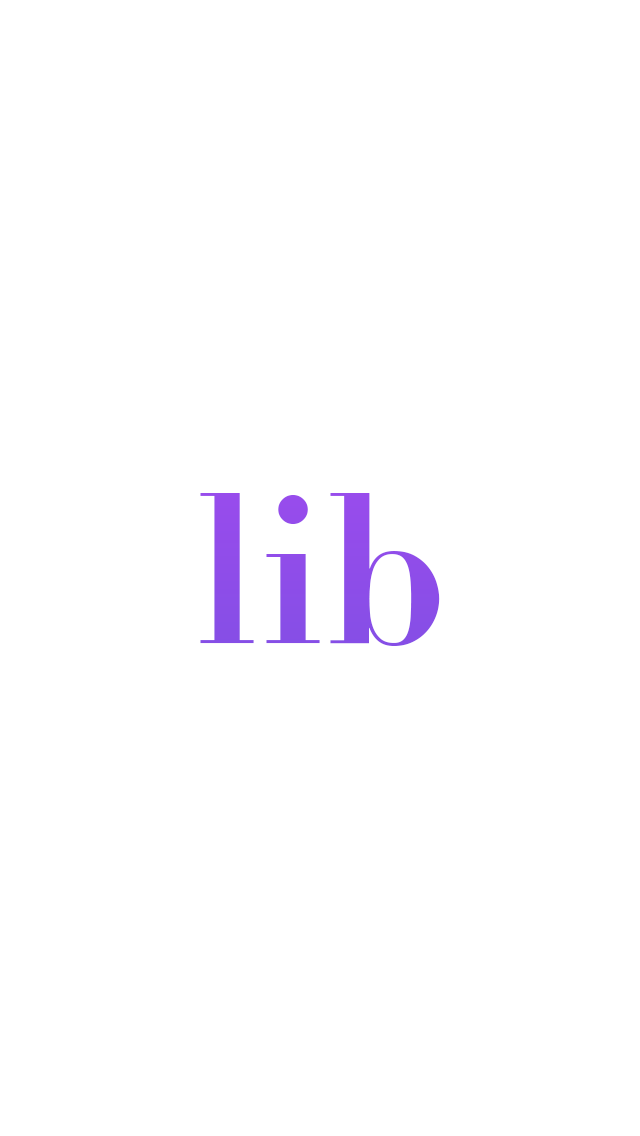
<style>
.page{position:relative;width:640px;height:1136px;background:#ffffff}
.page>*{position:absolute;margin:0}
.t1{font:207.4px "Didot-Bold";color:#8e4de8}
</style>
<div class="page">
<p class="t1" style="left:200px;top:493px;width:240px;height:153px">lib</p>
</div>
